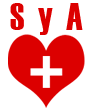
<style>
.page{position:relative;width:90px;height:108px;background:#ffffff}
.page>*{position:absolute;margin:0}
.t1{font:38px "Haettenschweiler";color:#dc0000}
</style>
<div class="page">
<p class="t1" style="left:10px;top:3px;width:73px;height:32px">S  y  A</p>
</div>
